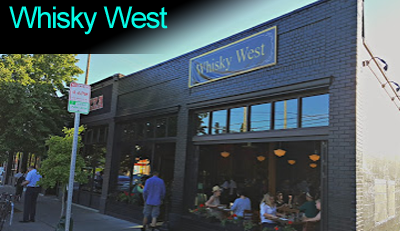
<style>
.page{position:relative;width:400px;height:231px}
.page>*{position:absolute;margin:0}
.t1{font:30px "ArialMT";letter-spacing:-0.05em;color:#05fbe7}
</style>
<div class="page">
<p class="t1" style="left:9px;top:6px;width:159px;height:29px">Whisky West</p>
</div>
